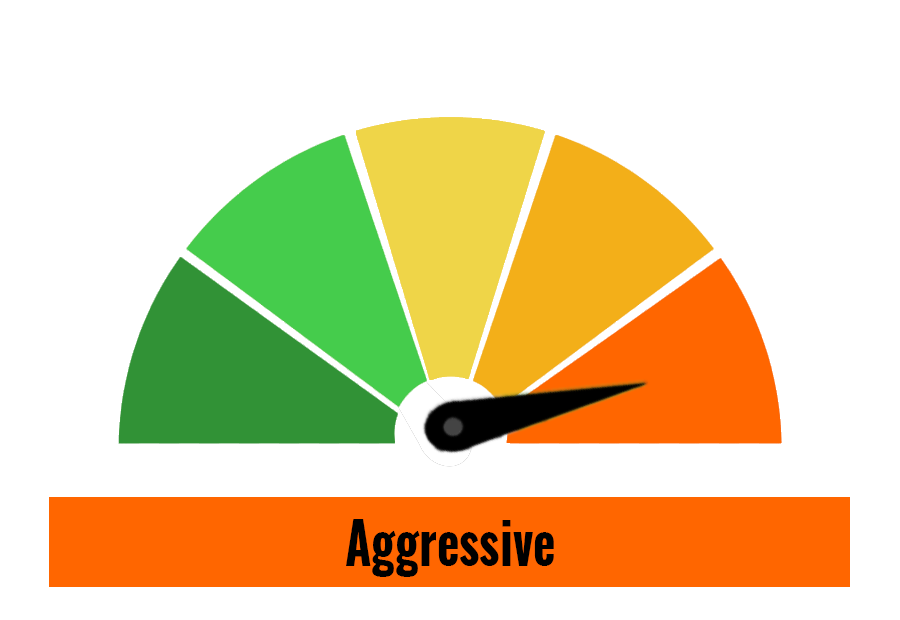
<style>
.page{position:relative;width:900px;height:620px;background:#ffffff}
.page>*{position:absolute;margin:0}
.t1{font:57.6px "Oswald-Bold";color:#000000;scale:0.83 1}
</style>
<div class="page">
<p class="t1" style="left:346px;top:519px;width:208px;height:58px">Aggressive</p>
</div>
